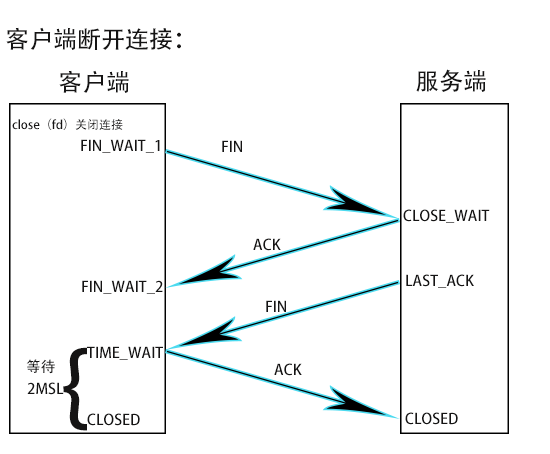
<style>
.page{position:relative;width:550px;height:454px;background:#ffffff}
.page>*{position:absolute;margin:0}
.t1{font:24px "AdobeHeitiStd-Regular";color:#151414}
.t2{font:12px "AdobeHeitiStd-Regular";color:#151414}
.t3{font:14.7px "AdobeHeitiStd-Regular";color:#151414}
.t4{font:91.5px "AdobeHeitiStd-Regular";color:#151414}
</style>
<div class="page">
<p class="t1" style="left:6px;top:27px;width:175px;height:23px">客户端断开连接：</p>
<p class="t1" style="left:59px;top:70px;width:70px;height:23px">客户端</p>
<p class="t1" style="left:416px;top:69px;width:70px;height:23px">服务端</p>
<p class="t2" style="left:12px;top:118px;width:111px;height:12px">close（fd）关闭连接</p>
<p class="t3" style="left:81px;top:139px;width:79px;height:14px">FIN_WAIT_1</p>
<p class="t3" style="left:222px;top:140px;width:20px;height:12px">FIN</p>
<p class="t3" style="left:403px;top:209px;width:87px;height:14px">CLOSE_WAIT</p>
<p class="t3" style="left:253px;top:238px;width:28px;height:13px">ACK</p>
<p class="t3" style="left:82px;top:280px;width:81px;height:14px">FIN_WAIT_2</p>
<p class="t3" style="left:406px;top:274px;width:68px;height:14px">LAST_ACK</p>
<p class="t3" style="left:266px;top:300px;width:20px;height:12px">FIN</p>
<p class="t4" style="left:63px;top:347px;width:24px;height:84px">{</p>
<p class="t3" style="left:87px;top:346px;width:76px;height:14px">TIME_WAIT</p>
<p class="t3" style="left:26px;top:359px;width:29px;height:15px">等待</p>
<p class="t3" style="left:274px;top:363px;width:28px;height:13px">ACK</p>
<p class="t3" style="left:27px;top:382px;width:37px;height:13px">2MSL</p>
<p class="t3" style="left:87px;top:413px;width:53px;height:13px">CLOSED</p>
<p class="t3" style="left:405px;top:412px;width:53px;height:13px">CLOSED</p>
</div>
